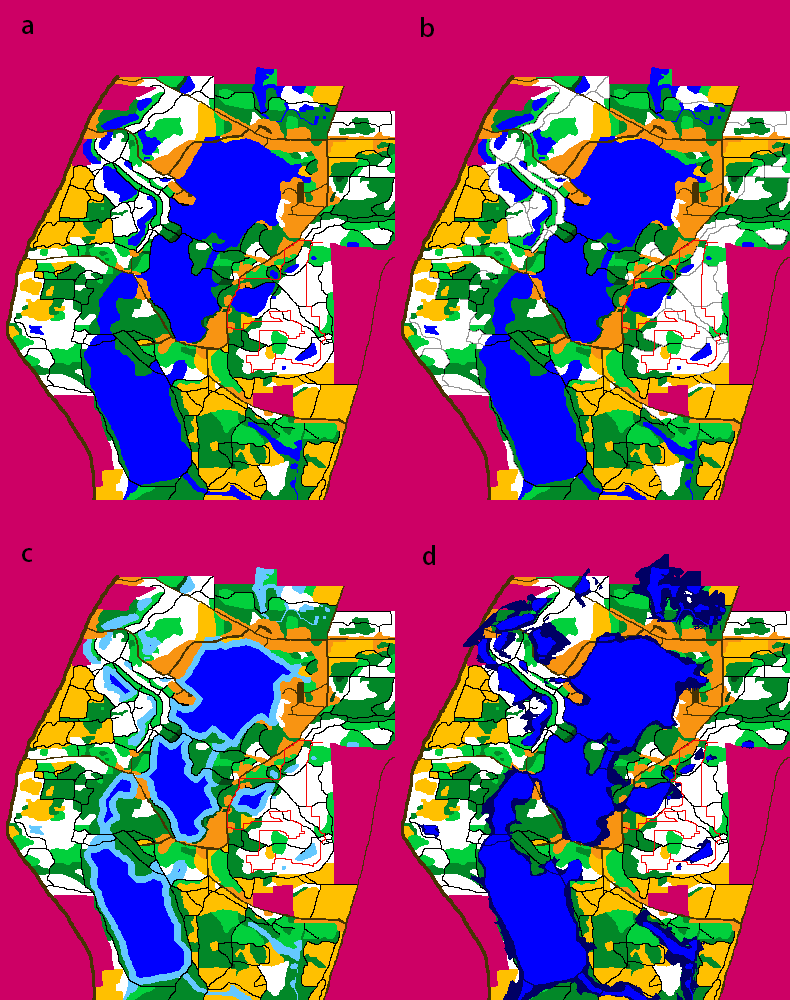
<style>
.page{position:relative;width:790px;height:1000px;background:#cd0065}
.page>*{position:absolute;margin:0}
.t1{font:25px "AdobeHeitiStd-Regular";color:#000000}
</style>
<div class="page">
<p class="t1" style="left:421px;top:17px;width:13px;height:20px">b</p>
<p class="t1" style="left:22px;top:20px;width:12px;height:14px">a</p>
<p class="t1" style="left:423px;top:545px;width:12px;height:20px">d</p>
<p class="t1" style="left:22px;top:548px;width:11px;height:14px">c</p>
</div>
